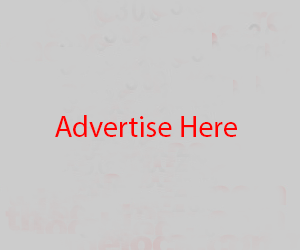
<style>
.page{position:relative;width:300px;height:250px;background:#cccccc}
.page>*{position:absolute;margin:0}
.t1{font:30px "MyriadPro-Regular";color:#ff0000}
</style>
<div class="page">
<p class="t1" style="left:55px;top:115px;width:182px;height:22px">Advertise Here</p>
</div>
